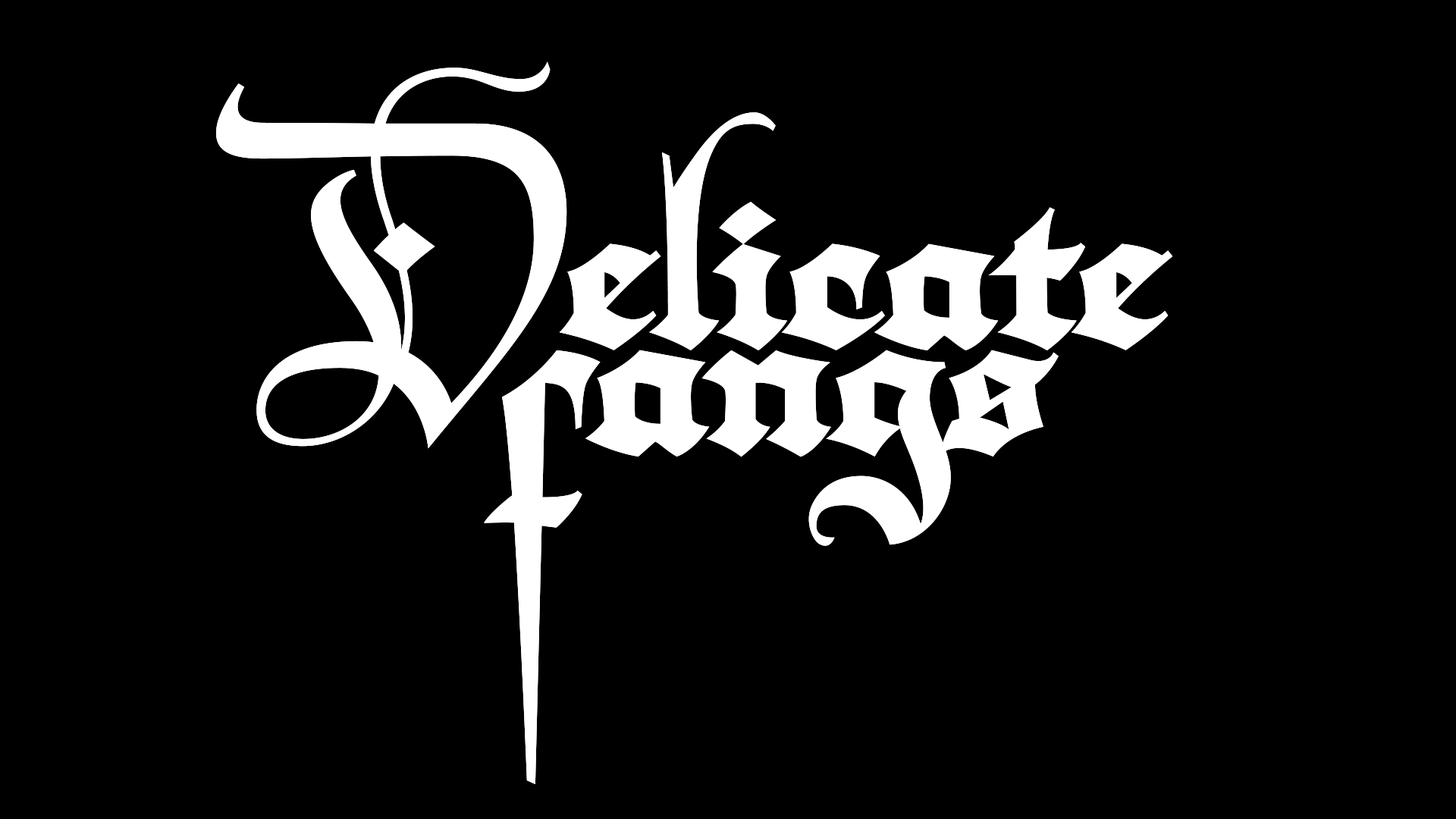
<style>
.page{position:relative;width:1456px;height:819px;background:#000000}
.page>*{position:absolute;margin:0}
.t1{font:376.9px "Darka-Regular";color:#ffffff}
</style>
<div class="page">
<p class="t1" style="left:216px;top:61px;width:957px;height:388px">Delicate</p>
<p class="t1" style="left:484px;top:350px;width:117px;height:434px">f</p>
<p class="t1" style="left:585px;top:350px;width:474px;height:196px">angs</p>
</div>
